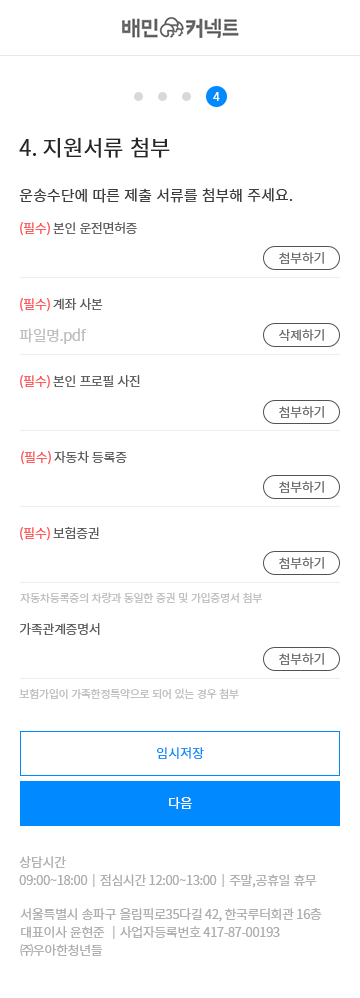
<style>
.page{position:relative;width:360px;height:998px;background:#ffffff}
.page>*{position:absolute;margin:0}
.t1{font:11.8px "NotoSansCJKkr-Regular";color:#ffffff}
.t2{font:22px "NotoSansCJKkr-Regular";color:#272727}
.t3{font:15px "NotoSansCJKkr-Regular";color:#3d3d3d}
.t4{font:13px "NotoSansCJKkr-Regular";letter-spacing:-0.03em;color:#595959}
.t5{font:13px "NotoSansCJKkr-Regular";letter-spacing:-0.03em;color:#ff4f4f}
.t6{font:13px "NotoSansCJKkr-Regular";letter-spacing:-0.03em;color:#6c6c6c}
.t7{font:15px "NotoSansCJKkr-Regular";letter-spacing:-0.03em;color:#bfbfbf}
.t8{font:11px "NotoSansCJKkr-Regular";letter-spacing:-0.03em;color:#bfbfbf}
.t9{font:13px "NotoSansCJKkr-Regular";color:#018aff}
.t10{font:13px "NotoSansCJKkr-Regular";color:#ffffff}
.t11{font:13px/18px "NotoSansCJKkr-Regular";letter-spacing:-0.03em;color:#adadad}
</style>
<div class="page">
<p class="t1" style="left:213px;top:92px;width:7px;height:9px">4</p>
<p class="t2" style="left:19px;top:137px;width:151px;height:21px">4. 지원서류 첨부</p>
<p class="t3" style="left:19px;top:188px;width:274px;height:15px">운송수단에 따른 제출 서류를 첨부해 주세요.</p>
<p class="t4" style="left:20px;top:222px;width:117px;height:14px"><span class="t5">(필수)</span> 본인 운전면허증</p>
<p class="t6" style="left:279px;top:252px;width:45px;height:12px">첨부하기</p>
<p class="t4" style="left:20px;top:298px;width:83px;height:14px"><span class="t5">(필수)</span> 계좌 사본</p>
<p class="t7" style="left:19px;top:328px;width:68px;height:16px">파일명.pdf</p>
<p class="t6" style="left:279px;top:329px;width:45px;height:12px">삭제하기</p>
<p class="t4" style="left:20px;top:375px;width:120px;height:14px"><span class="t5">(필수)</span> 본인 프로필 사진</p>
<p class="t6" style="left:279px;top:406px;width:45px;height:12px">첨부하기</p>
<p class="t4" style="left:21px;top:451px;width:106px;height:14px"><span class="t5">(필수)</span> 자동차 등록증</p>
<p class="t6" style="left:279px;top:481px;width:45px;height:12px">첨부하기</p>
<p class="t5" style="left:20px;top:526px;width:79px;height:15px">(필수)<span class="t4"> 보험증권</span></p>
<p class="t6" style="left:279px;top:557px;width:45px;height:12px">첨부하기</p>
<p class="t8" style="left:20px;top:592px;width:242px;height:11px">자동차등록증의 차량과 동일한 증권 및 가입증명서 첨부</p>
<p class="t4" style="left:20px;top:623px;width:80px;height:12px">가족관계증명서</p>
<p class="t6" style="left:279px;top:653px;width:45px;height:12px">첨부하기</p>
<p class="t8" style="left:19px;top:688px;width:220px;height:11px">보험가입이 가족한정특약으로 되어 있는 경우 첨부</p>
<p class="t9" style="left:157px;top:747px;width:47px;height:12px">임시저장</p>
<p class="t10" style="left:169px;top:797px;width:23px;height:12px">다음</p>
<p class="t11" style="left:19px;top:856px;width:298px;height:32px">상담시간 <br>09:00~18:00│점심시간 12:00~13:00│주말,공휴일 휴무</p>
<p class="t11" style="left:20px;top:908px;width:302px;height:49px">서울특별시 송파구 올림픽로35다길 42, 한국루터회관 16층 <br>대표이사 윤현준 │사업자등록번호 417-87-00193<br>㈜우아한청년들</p>
</div>
